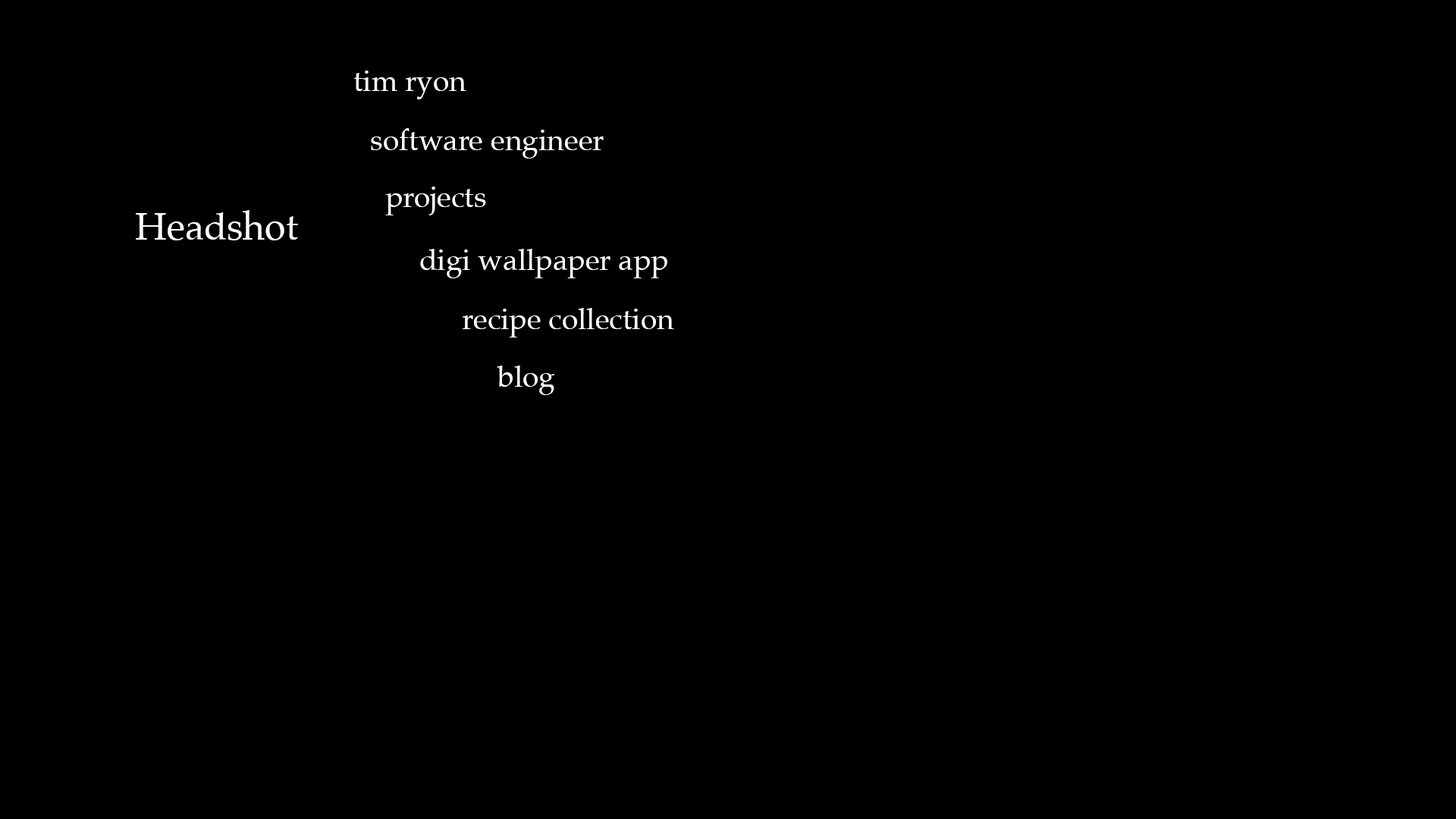
<style>
.page{position:relative;width:1456px;height:819px;background:#000000}
.page>*{position:absolute;margin:0}
.t1{font:29.6px "Palatino-Roman";color:#ffffff}
.t2{font:37.9px "Palatino-Roman";color:#ffffff}
</style>
<div class="page">
<p class="t1" style="left:353px;top:71px;width:113px;height:28px">tim ryon</p>
<p class="t1" style="left:371px;top:128px;width:233px;height:30px">software engineer</p>
<p class="t1" style="left:385px;top:187px;width:101px;height:28px">projects</p>
<p class="t2" style="left:136px;top:210px;width:162px;height:30px">Headshot</p>
<p class="t1" style="left:420px;top:249px;width:247px;height:29px">digi wallpaper app</p>
<p class="t1" style="left:462px;top:308px;width:212px;height:29px">recipe collection</p>
<p class="t1" style="left:497px;top:366px;width:58px;height:29px">blog</p>
</div>
